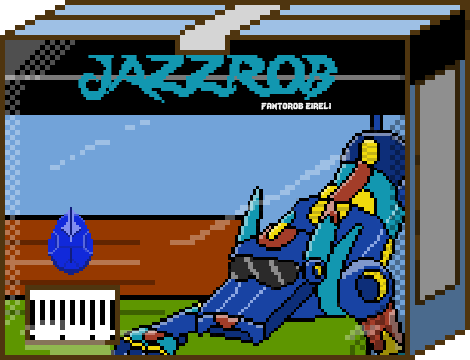
<style>
.page{position:relative;width:470px;height:360px}
.page>*{position:absolute;margin:0}
.t1{font:48px "Lady-Radical";color:#1297b0;scale:0.84 1}
.t2{font:12px "Lady-Radical";color:#fbfbfb}
</style>
<div class="page">
<p class="t1" style="left:78px;top:55px;width:260px;height:48px">JAZZROB</p>
<p class="t2" style="left:261px;top:102px;width:70px;height:8px">fantorob eireli</p>
</div>
